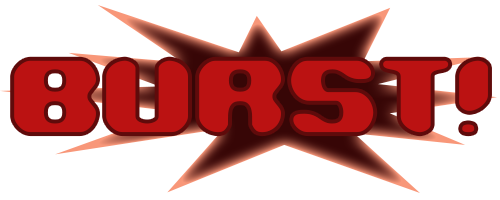
<style>
.page{position:relative;width:500px;height:200px;background:#ffffff}
.page>*{position:absolute;margin:0}
.t1{font:104.2px "JawbreakerBRK";color:#c50202}
</style>
<div class="page">
<p class="t1" style="left:14px;top:60px;width:474px;height:73px">BURST!</p>
</div>
